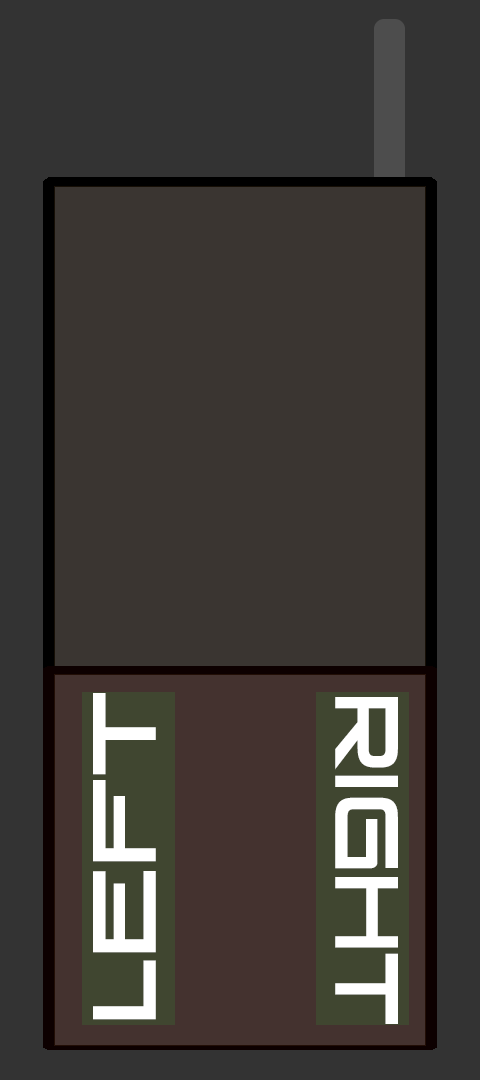
<style>
.page{position:relative;width:480px;height:1080px;background:#3a3531}
.page>*{position:absolute;margin:0}
.t1{font:84.7px "VenusRising-Regular";color:#ffffff;scale:1.05 1}
.t2{font:84.7px "VenusRising-Regular";color:#ffffff;scale:0.91 1}
</style>
<div class="page">
<p class="t1" style="left:93px;top:693px;width:63px;height:327px;rotate:-90deg">Left</p>
<p class="t2" style="left:335px;top:697px;width:63px;height:327px;rotate:90deg">right</p>
</div>
